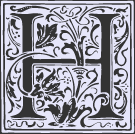
<style>
.page{position:relative;width:135px;height:134px;background:#e6e6fa}
.page>*{position:absolute;margin:0}
.t1{font:150px "MedievalInitialOne";color:#e6e6fa}
</style>
<div class="page">
<p class="t1" style="left:0px;top:0px;width:135px;height:133px">Н</p>
</div>
